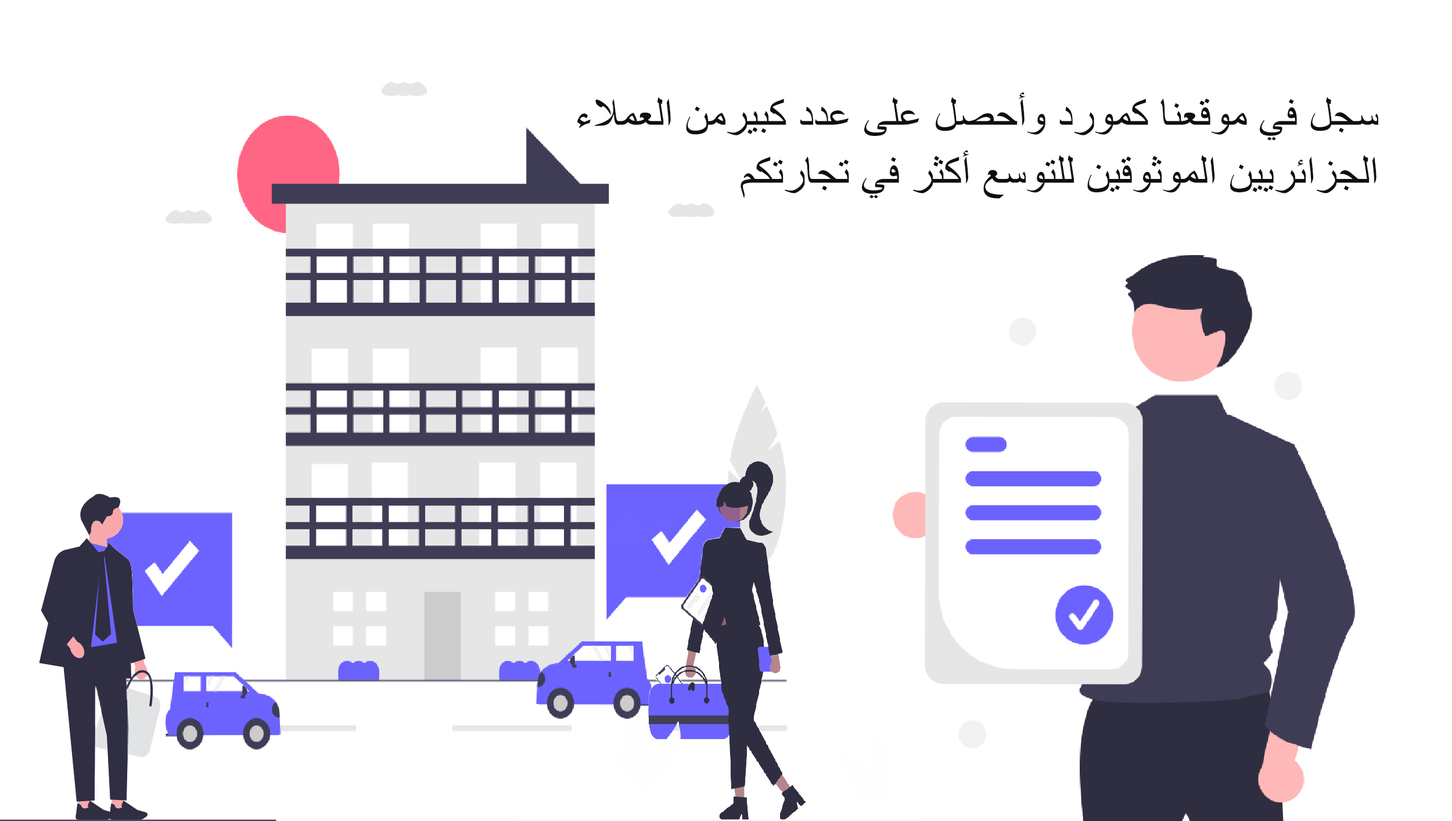
<style>
.page{position:relative;width:1452px;height:821px;background:#ffffff}
.page>*{position:absolute;margin:0}
.t1{font:44.2px/58px "ArialMT";color:#0e0f0e}
</style>
<div class="page">
<p class="t1" style="left:578px;top:92px;width:801px;height:107px;text-align:right">سجل في موقعنا كمورد وأحصل على عدد كبيرمن العملاء<br>الجزائريين الموثوقين للتوسع أكثر في تجارتكم</p>
</div>
